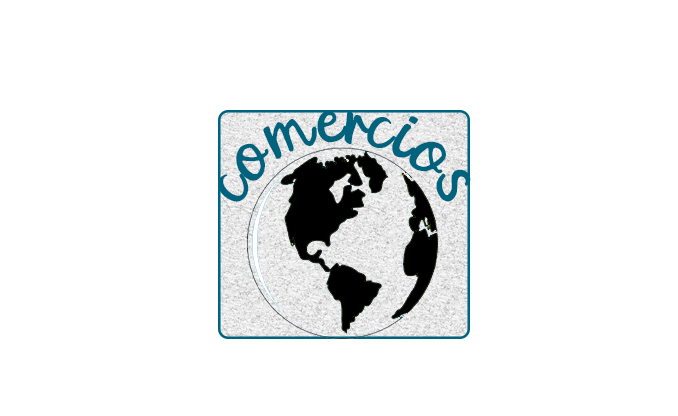
<style>
.page{position:relative;width:678px;height:416px;background:#ffffff}
.page>*{position:absolute;margin:0}
.t1{font:72px "roctherscript";color:#00637e}
</style>
<div class="page">
<p class="t1" style="left:218px;top:110px;width:253px;height:92px">comercios</p>
</div>
